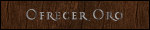
<style>
.page{position:relative;width:150px;height:30px}
.page>*{position:absolute;margin:0}
.t1{font:15.3px "Mason-Regular";letter-spacing:0.08em;color:#9a9a9a;scale:0.92 1}
</style>
<div class="page">
<p class="t1" style="left:26px;top:9px;width:97px;height:12px">Ofrecer Oro</p>
</div>
